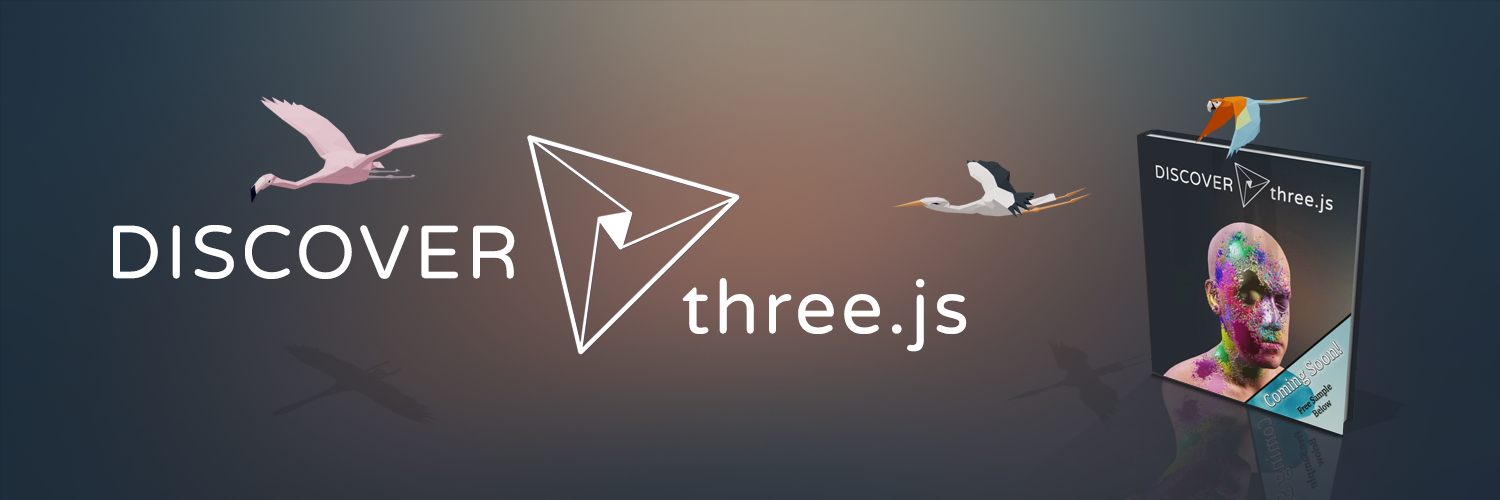
<style>
.page{position:relative;width:1500px;height:500px}
.page>*{position:absolute;margin:0}
.t1{font:75px "VarelaRound-Regular";letter-spacing:0.055em;color:#ffffff}
</style>
<div class="page">
<p class="t1" style="left:113px;top:225px;width:402px;height:54px">DISCOVER</p>
<p class="t1" style="left:682px;top:278px;width:285px;height:74px">three.js</p>
</div>
